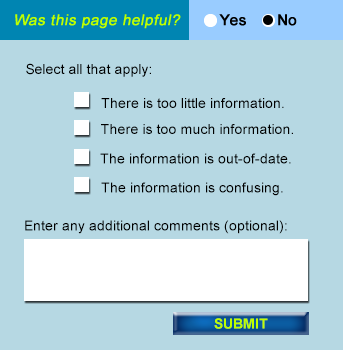
<style>
.page{position:relative;width:343px;height:350px;background:#b6d8e3}
.page>*{position:absolute;margin:0}
.t1{font:14px "ArialMT";color:#000000}
.t2{font:14px "Arial-BoldMT";color:#bfff00}
</style>
<div class="page">
<p class="t1" style="left:26px;top:63px;width:125px;height:14px">Select all that apply:</p>
<p class="t1" style="left:101px;top:98px;width:183px;height:10px">There is too little information.</p>
<p class="t1" style="left:101px;top:124px;width:192px;height:10px">There is too much information.</p>
<p class="t1" style="left:100px;top:153px;width:191px;height:11px">The information is out-of-date.</p>
<p class="t1" style="left:101px;top:182px;width:182px;height:14px">The information is confusing.</p>
<p class="t1" style="left:25px;top:220px;width:262px;height:14px">Enter any additional comments (optional):</p>
<p class="t2" style="left:214px;top:318px;width:54px;height:11px">SUBMIT</p>
</div>
